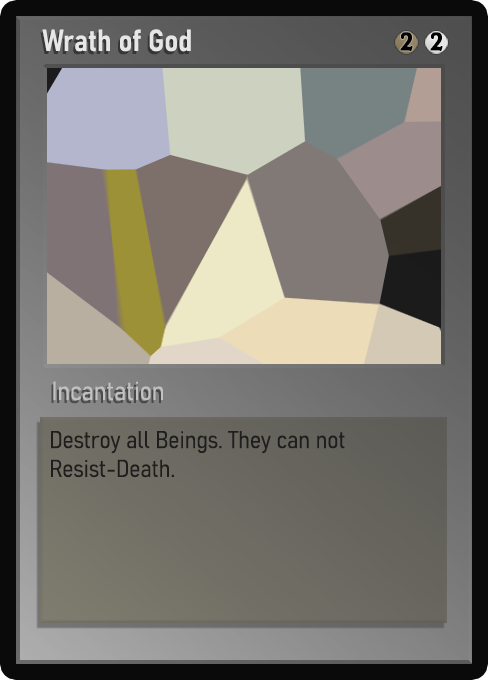
<style>
.page{position:relative;width:488px;height:680px}
.page>*{position:absolute;margin:0}
.t1{font:30px "Bahnschrift-SemiBoldSemiCondensed";color:#f2f2f2;font-weight:bold}
.t2{font:25px "WTRRoycroft";color:#000000;font-weight:bold;scale:1.09 1}
.t3{font:26px "Bahnschrift-LightSemiCondensed";color:#c8c8c8;font-weight:bold}
.t4{font:24px "Bahnschrift-LightSemiCondensed";color:#1e1e1e;font-weight:bold}
</style>
<div class="page">
<p class="t1" style="left:42px;top:29px;width:149px;height:23px;opacity:0.9">Wrath of God</p>
<p class="t2" style="left:400px;top:32px;width:13px;height:19px">2</p>
<p class="t2" style="left:430px;top:32px;width:13px;height:19px">2</p>
<p class="t3" style="left:53px;top:381px;width:110px;height:20px;opacity:0.9">Incantation</p>
<p class="t4" style="left:51px;top:431px;width:294px;height:47px">Destroy all Beings. They can not Resist-Death.</p>
</div>
